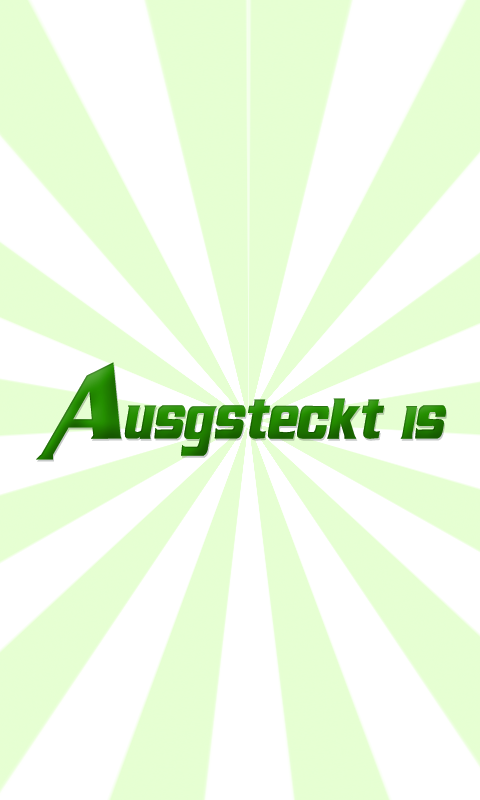
<style>
.page{position:relative;width:480px;height:800px;background:#ffffff}
.page>*{position:absolute;margin:0}
.t1{font:96px "AirMillhouseItalic";letter-spacing:-0.01em;color:#248e00;scale:0.81 1}
</style>
<div class="page">
<p class="t1" style="left:36px;top:362px;width:410px;height:98px">Ausgsteckt is</p>
</div>
